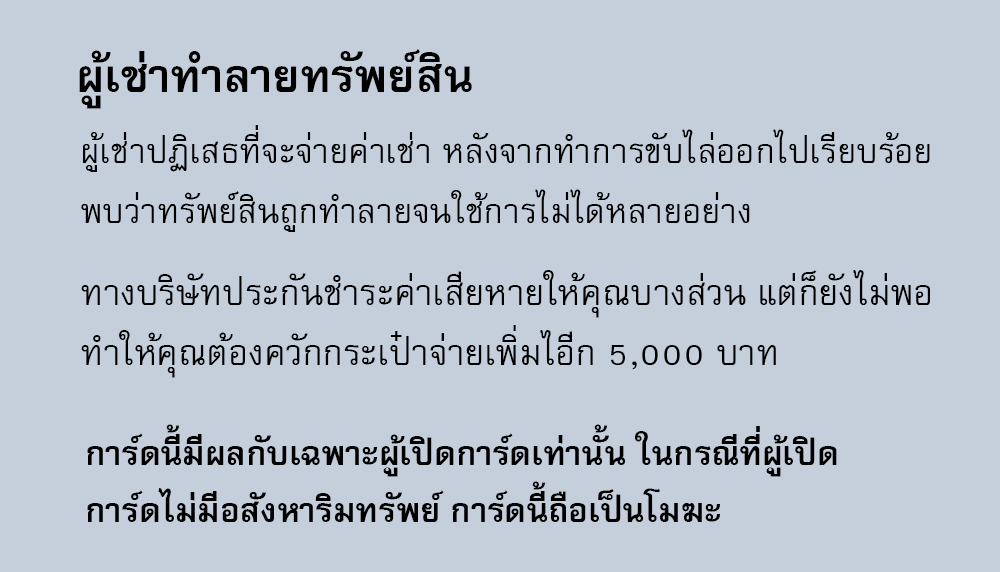
<style>
.page{position:relative;width:1000px;height:572px;background:#c5cedb}
.page>*{position:absolute;margin:0}
.t1{font:64px "FreesiaUPCBold";color:#000000}
.t2{font:48px/60px "FreesiaUPC";color:#000000}
.t3{font:50px/60px "FreesiaUPC";color:#000000}
.t4{font:47px "FreesiaUPCBold";color:#000000}
</style>
<div class="page">
<p class="t1" style="left:79px;top:49px;width:393px;height:60px">ผู้เช่าทำลายทรัพย์สิน</p>
<p class="t2" style="left:81px;top:125px;width:849px;height:107px">ผู้เช่าปฏิเสธที่จะจ่ายค่าเช่า หลังจากทำการขับไล่ออกไปเรียบร้อย<br>พบว่าทรัพย์สินถูกทำลายจนใช้การไม่ได้หลายอย่าง</p>
<p class="t3" style="left:81px;top:270px;width:849px;height:108px">ทางบริษัทประกันชำระค่าเสียหายให้คุณบางส่วน แต่ก็ยังไม่พอ<br>ทำให้คุณต้องควักกระเป๋าจ่ายเพิ่มไอีก 5,000 บาท</p>
<p class="t4" style="left:87px;top:424px;width:750px;height:98px">การ์ดนี้มีผลกับเฉพาะผู้เปิดการ์ดเท่านั้น ในกรณีที่ผู้เปิด<br>การ์ดไม่มีอสังหาริมทรัพย์ การ์ดนี้ถือเป็นโมฆะ</p>
</div>
